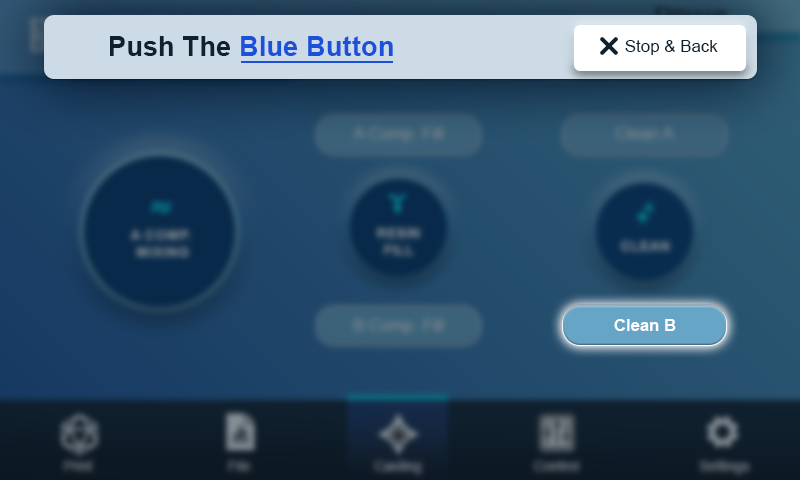
<style>
.page{position:relative;width:800px;height:480px}
.page>*{position:absolute;margin:0}
.t1{font:27.1px "Arial-BoldMT";letter-spacing:0.01em;color:#1b51da}
.t2{font:27.1px "Arial-BoldMT";letter-spacing:0.01em;color:#0f202f}
.t3{font:16.7px "ArialMT";letter-spacing:0.01em;color:#0f202f}
.t4{font:16.7px "Arial-BoldMT";color:#ffffff}
</style>
<div class="page">
<p class="t1" style="left:110px;top:36px;width:283px;height:20px"><span class="t2">Push The </span>Blue Button</p>
<p class="t3" style="left:625px;top:40px;width:93px;height:15px">Stop &amp; Back</p>
<p class="t4" style="left:614px;top:319px;width:62px;height:12px">Clean B</p>
</div>
